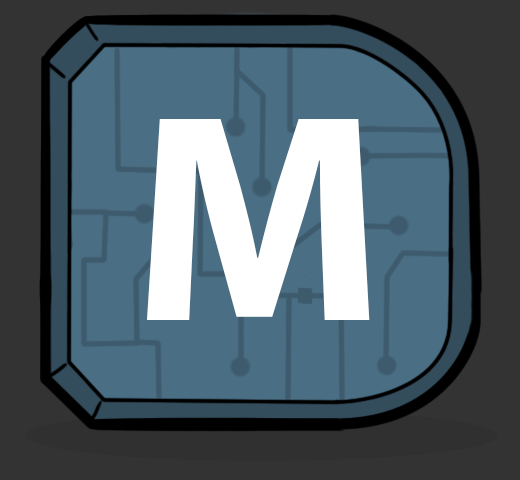
<style>
.page{position:relative;width:520px;height:480px;background:#4a6e84}
.page>*{position:absolute;margin:0}
.t1{font:298.7px "MyriadPro-Bold";color:#ffffff}
</style>
<div class="page">
<p class="t1" style="left:147px;top:119px;width:223px;height:201px">M</p>
</div>
